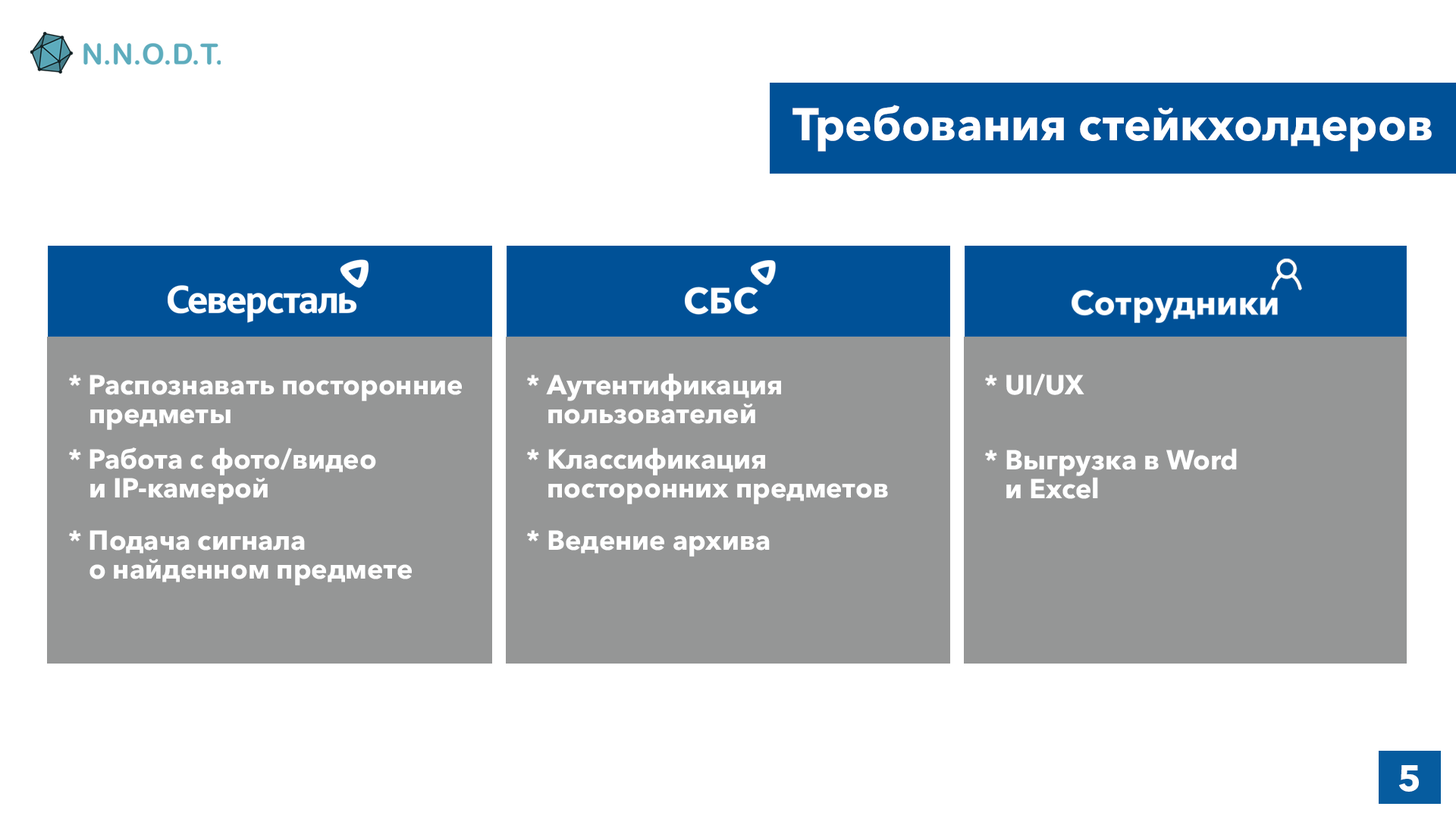
<style>
.page{position:relative;width:1456px;height:819px;background:#ffffff}
.page>*{position:absolute;margin:0}
.t1{font:45.5px "AvenirNextCyr-Bold";color:#ffffff}
.t2{font:27.3px/27.9px "AvenirNextCyr-Bold";color:#ffffff}
.t3{font:27.3px "AvenirNextCyr-Bold";color:#ffffff}
.t4{font:36.4px "AvenirNextCyr-Bold";color:#ffffff}
</style>
<div class="page">
<p class="t1" style="left:792px;top:105px;width:640px;height:47px">Требования стейкхолдеров</p>
<p class="t2" style="left:69px;top:375px;width:393px;height:55px">* Распознавать посторонние<br>   предметы</p>
<p class="t2" style="left:527px;top:373px;width:254px;height:51px">* Аутентификация<br>   пользователей</p>
<p class="t3" style="left:985px;top:373px;width:99px;height:23px">* UI/UX</p>
<p class="t2" style="left:69px;top:447px;width:307px;height:57px">* Работа с фото/видео<br>   и IP-камерой</p>
<p class="t2" style="left:527px;top:447px;width:361px;height:57px">* Классификация<br>   посторонних предметов</p>
<p class="t2" style="left:985px;top:448px;width:252px;height:51px">* Выгрузка в Word<br>   и Excel</p>
<p class="t2" style="left:69px;top:530px;width:343px;height:55px">* Подача сигнала<br>   о найденном предмете</p>
<p class="t3" style="left:527px;top:530px;width:243px;height:27px">* Ведение архива</p>
<p class="t4" style="left:1399px;top:765px;width:20px;height:27px">5</p>
</div>
